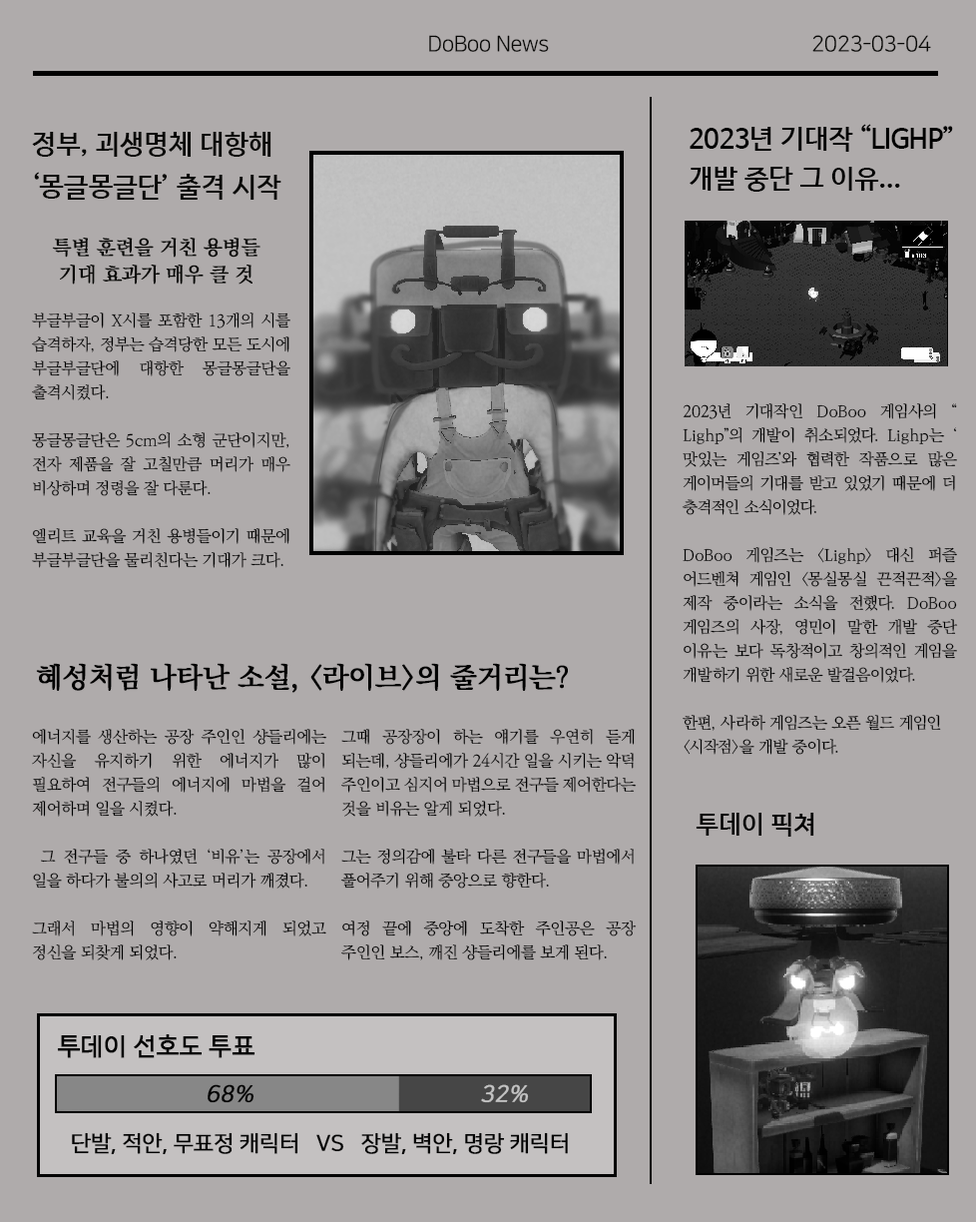
<style>
.page{position:relative;width:976px;height:1222px;background:#afabab}
.page>*{position:absolute;margin:0}
.t1{font:22px "NanumSquareR";letter-spacing:-0.02em;color:#090907}
.t2{font:26.7px/39.2px "HancomGothicBold";letter-spacing:-0.02em;color:#000000}
.t3{font:26.9px/42.9px "HanSantteutDotumBold";letter-spacing:-0.02em;color:#090907}
.t4{font:20px/26.9px "KoPubBatangMedium";letter-spacing:-0.02em;color:#090907;font-weight:bold}
.t5{font:16px/24px "KoPubBatangLight";letter-spacing:-0.02em;color:#000000}
.t6{font:27.9px "KoPubBatangMedium";letter-spacing:-0.02em;color:#000000;font-weight:bold}
.t7{font:25.1px "HancomGothicBold";letter-spacing:-0.02em;color:#000000}
.t8{font:24.5px "HancomGothicRegular";letter-spacing:-0.02em;color:#000000;font-weight:bold}
.t9{font:23px "NanumSquareR";letter-spacing:-0.02em;color:#000000;font-weight:bold;font-style:italic}
.t10{font:23px "NanumSquareR";letter-spacing:-0.02em;color:#c2c2c2;font-weight:bold;font-style:italic}
.t11{font:21.9px "NanumSquareR";letter-spacing:-0.02em;color:#000000;font-weight:bold}
</style>
<div class="page">
<p class="t1" style="left:429px;top:35px;width:120px;height:17px">DoBoo News</p>
<p class="t1" style="left:812px;top:35px;width:119px;height:17px">2023-03-04</p>
<p class="t2" style="left:690px;top:124px;width:263px;height:68px">2023년 기대작 “LIGHP”<br>개발 중단 그 이유...</p>
<p class="t3" style="left:32px;top:132px;width:249px;height:68px">정부, 괴생명체 대항해<br>‘몽글몽글단’ 출격 시작</p>
<p class="t4" style="left:52px;top:238px;width:208px;height:46px;text-align:center">특별 훈련을 거친 용병들<br>기대 효과가 매우 클 것</p>
<p class="t5" style="left:32px;top:312px;width:258px;height:256px;text-align:justify">부글부글이 X시를 포함한 13개의 시를 습격하자, 정부는 습격당한 모든 도시에 부글부글단에 대항한 몽글몽글단을 출격시켰다.<br><br>몽글몽글단은 5cm의 소형 군단이지만, 전자 제품을 잘 고칠만큼 머리가 매우 비상하며 정령을 잘 다룬다.<br><br>엘리트 교육을 거친 용병들이기 때문에 부글부글단을 물리친다는 기대가 크다.</p>
<p class="t5" style="left:682px;top:403px;width:276px;height:352px;text-align:justify">2023년 기대작인 DoBoo 게임사의 “Lighp”의 개발이 취소되었다. Lighp는 ‘맛있는 게임즈’와 협력한 작품으로 많은 게이머들의 기대를 받고 있었기 때문에 더 충격적인 소식이었다.<br><br>DoBoo 게임즈는 &lt;Lighp&gt; 대신 퍼즐 어드벤쳐 게임인 &lt;몽실몽실 끈적끈적&gt;을 제작 중이라는 소식을 전했다. DoBoo 게임즈의 사장, 영민이 말한 개발 중단 이유는 보다 독창적이고 창의적인 게임을 개발하기 위한 새로운 발걸음이었다.<br><br>한편, 사라하 게임즈는 오픈 월드 게임인 <br>&lt;시작점&gt;을 개발 중이다.</p>
<p class="t6" style="left:36px;top:663px;width:532px;height:30px">혜성처럼 나타난 소설, &lt;라이브&gt;의 줄거리는?</p>
<p class="t5" style="left:32px;top:729px;width:295px;height:231px;text-align:justify">에너지를 생산하는 공장 주인인 샹들리에는 자신을 유지하기 위한 에너지가 많이 필요하여 전구들의 에너지에 마법을 걸어 제어하며 일을 시켰다.<br><br> 그 전구들 중 하나였던 ‘비유’는 공장에서 일을 하다가 불의의 사고로 머리가 깨졌다.<br><br>그래서 마법의 영향이 약해지게 되었고 정신을 되찾게 되었다.</p>
<p class="t5" style="left:340px;top:729px;width:297px;height:231px;text-align:justify">그때 공장장이 하는 얘기를 우연히 듣게 되는데, 샹들리에가 24시간 일을 시키는 악덕 주인이고 심지어 마법으로 전구들 제어한다는 것을 비유는 알게 되었다.<br> <br>그는 정의감에 불타 다른 전구들을 마법에서 풀어주기 위해 중앙으로 향한다.<br><br>여정 끝에 중앙에 도착한 주인공은 공장 주인인 보스, 깨진 샹들리에를 보게 된다.</p>
<p class="t7" style="left:696px;top:812px;width:118px;height:24px">투데이 픽쳐</p>
<p class="t8" style="left:57px;top:1034px;width:199px;height:24px">투데이 선호도 투표</p>
<p class="t9" style="left:208px;top:1084px;width:47px;height:19px">68%</p>
<p class="t10" style="left:481px;top:1084px;width:48px;height:19px">32%</p>
<p class="t11" style="left:72px;top:1132px;width:496px;height:23px">단발, 적안, 무표정 캐릭터   VS   장발, 벽안, 명랑 캐릭터</p>
</div>
